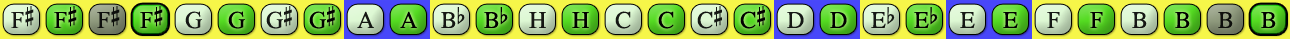
<style>
.page{position:relative;width:1290px;height:39px}
.page>*{position:absolute;margin:0}
.t1{font:24px "OpusChords";color:#000000}
.t2{font:24px "OpusChords";letter-spacing:-0.025em;color:#000000}
</style>
<div class="page">
<p class="t1" style="left:11px;top:6px;width:23px;height:22px;opacity:0.9">F#</p>
<p class="t1" style="left:54px;top:6px;width:23px;height:22px">F#</p>
<p class="t1" style="left:97px;top:6px;width:23px;height:22px;opacity:0.9">F#</p>
<p class="t1" style="left:140px;top:6px;width:23px;height:22px">F#</p>
<p class="t2" style="left:266px;top:6px;width:26px;height:23px;opacity:0.9">G#</p>
<p class="t2" style="left:309px;top:6px;width:26px;height:23px">G#</p>
<p class="t1" style="left:697px;top:6px;width:25px;height:23px;opacity:0.9">C#</p>
<p class="t1" style="left:740px;top:6px;width:25px;height:23px">C#</p>
<p class="t1" style="left:185px;top:11px;width:17px;height:18px;opacity:0.9">G</p>
<p class="t1" style="left:228px;top:11px;width:17px;height:18px">G</p>
<p class="t1" style="left:357px;top:11px;width:17px;height:17px;opacity:0.9">A</p>
<p class="t1" style="left:400px;top:11px;width:17px;height:17px">A</p>
<p class="t1" style="left:441px;top:7px;width:24px;height:21px;opacity:0.9">Bb</p>
<p class="t1" style="left:484px;top:7px;width:24px;height:21px">Bb</p>
<p class="t1" style="left:529px;top:12px;width:17px;height:16px;opacity:0.9">H</p>
<p class="t1" style="left:572px;top:12px;width:17px;height:16px">H</p>
<p class="t1" style="left:615px;top:11px;width:16px;height:18px;opacity:0.9">C</p>
<p class="t1" style="left:658px;top:11px;width:16px;height:18px">C</p>
<p class="t1" style="left:787px;top:12px;width:17px;height:16px;opacity:0.9">D</p>
<p class="t1" style="left:830px;top:12px;width:17px;height:16px">D</p>
<p class="t1" style="left:871px;top:7px;width:24px;height:21px;opacity:0.9">Eb</p>
<p class="t1" style="left:914px;top:7px;width:24px;height:21px">Eb</p>
<p class="t1" style="left:960px;top:12px;width:15px;height:16px;opacity:0.9">E</p>
<p class="t1" style="left:1003px;top:12px;width:15px;height:16px">E</p>
<p class="t1" style="left:1047px;top:12px;width:13px;height:16px;opacity:0.9">F</p>
<p class="t1" style="left:1090px;top:12px;width:13px;height:16px">F</p>
<p class="t1" style="left:1132px;top:12px;width:15px;height:16px;opacity:0.9">B</p>
<p class="t1" style="left:1175px;top:12px;width:15px;height:16px">B</p>
<p class="t1" style="left:1218px;top:12px;width:15px;height:16px;opacity:0.9">B</p>
<p class="t1" style="left:1261px;top:12px;width:15px;height:16px">B</p>
</div>
